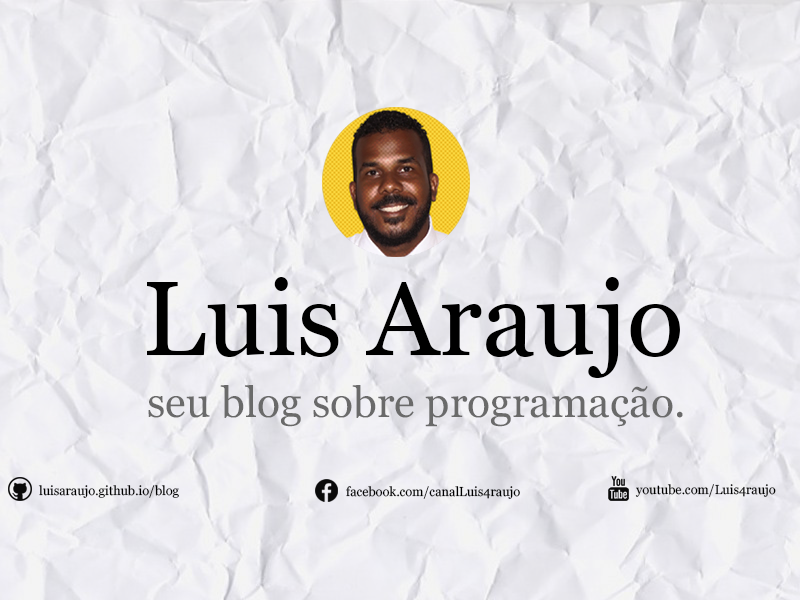
<style>
.page{position:relative;width:800px;height:600px}
.page>*{position:absolute;margin:0}
.t1{font:105.4px "Georgia";color:#000000}
.t2{font:42.6px "Georgia";color:#6a6a6a}
.t3{font:13px "Georgia";color:#000000}
</style>
<div class="page">
<p class="t1" style="left:147px;top:277px;width:533px;height:101px">Luis Araujo</p>
<p class="t2" style="left:148px;top:385px;width:535px;height:42px">seu blog sobre programação.</p>
<p class="t3" style="left:38px;top:485px;width:141px;height:13px">luisaraujo.github.io/blog</p>
<p class="t3" style="left:346px;top:486px;width:174px;height:13px">facebook.com/canalLuis4raujo</p>
<p class="t3" style="left:635px;top:484px;width:141px;height:13px">youtube.com/Luis4raujo</p>
</div>
